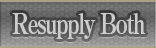
<style>
.page{position:relative;width:156px;height:48px}
.page>*{position:absolute;margin:0}
.t1{font:28px "RyuminPro-ExBold";letter-spacing:-0.08em;color:#cdcdcd;scale:0.8 1}
</style>
<div class="page">
<p class="t1" style="left:12px;top:13px;width:133px;height:26px">Resupply Both</p>
</div>
